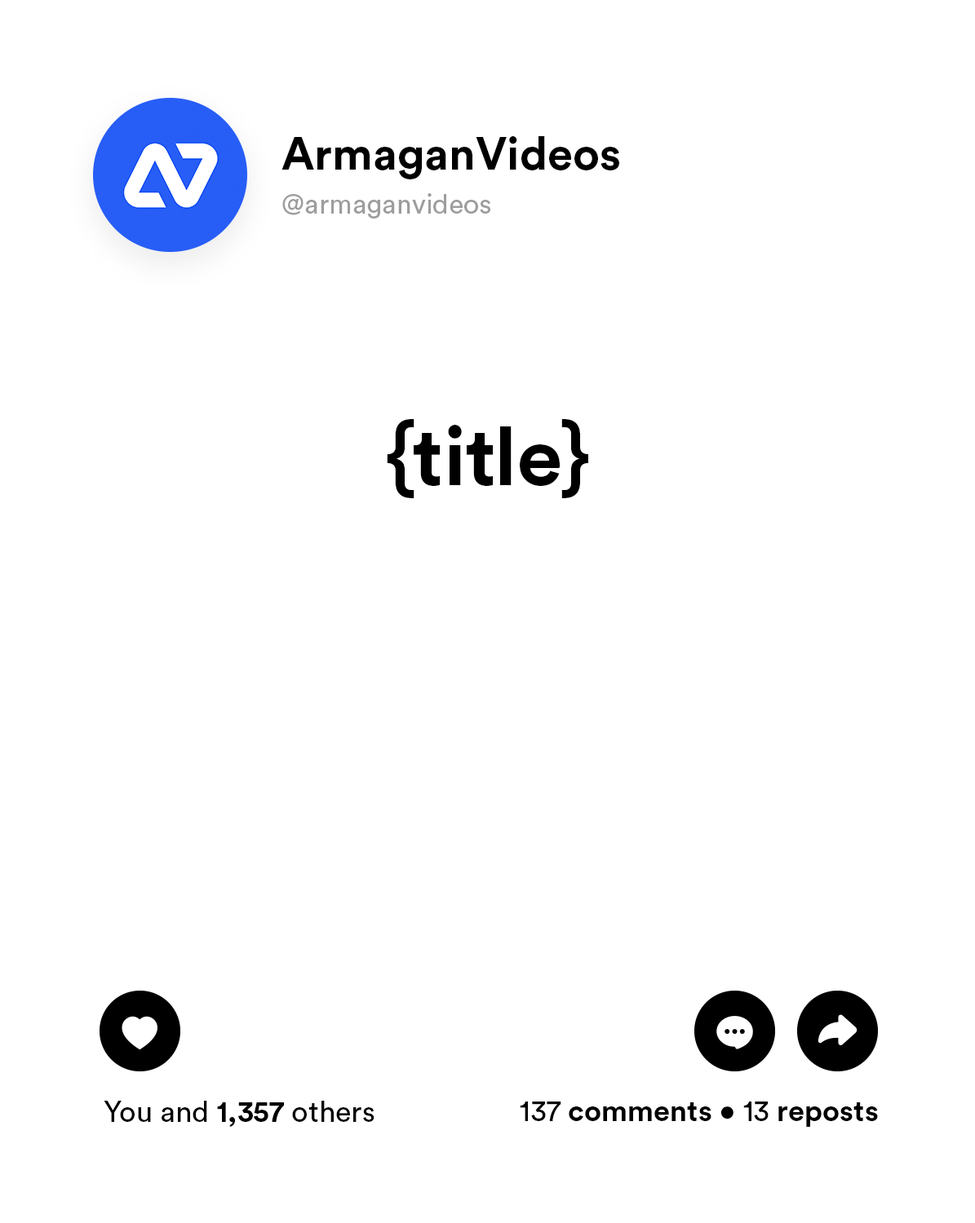
<style>
.page{position:relative;width:975px;height:1223px;background:#ffffff}
.page>*{position:absolute;margin:0}
.t1{font:45.6px "CircularStd-Bold";color:#000000}
.t2{font:27.4px "CircularStd-Book";color:#9d9d9d}
.t3{font:81.6px "CircularStd-Bold";color:#000000}
.t4{font:29.4px "CircularStd-Book";color:#000000}
.t5{font:29.4px "CircularStd-Bold";color:#000000}
.t6{font:29.4px "CircularSpotifyText-Light";color:#000000}
</style>
<div class="page">
<p class="t1" style="left:281px;top:136px;width:338px;height:43px">ArmaganVideos</p>
<p class="t2" style="left:282px;top:193px;width:208px;height:26px">@armaganvideos</p>
<p class="t3" style="left:387px;top:419px;width:201px;height:79px">{title}</p>
<p class="t4" style="left:104px;top:1101px;width:270px;height:26px">You and <span class="t5">1,357</span> others</p>
<p class="t5" style="left:520px;top:1102px;width:358px;height:25px"><span class="t4">137 </span>comments <span class="t6">• </span><span class="t4">13 </span>reposts</p>
</div>
